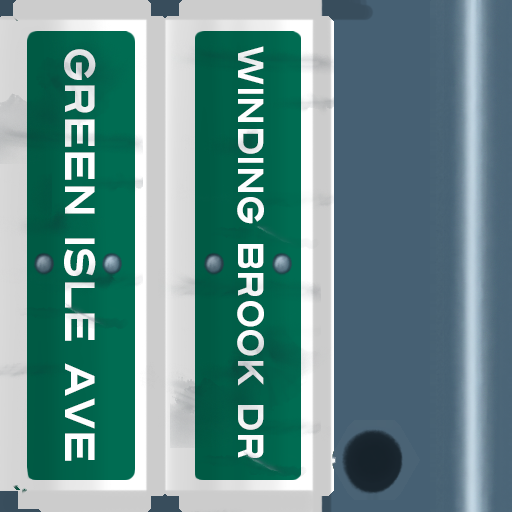
<style>
.page{position:relative;width:512px;height:512px}
.page>*{position:absolute;margin:0}
.t1{font:42px "Turnpike";color:#fefeff;scale:0.75 1}
.t2{font:36px "Turnpike";color:#fefeff;scale:0.75 1}
</style>
<div class="page">
<p class="t1" style="left:64px;top:49px;width:32px;height:412px;rotate:90deg">Green isle Ave</p>
<p class="t2" style="left:237px;top:46px;width:27px;height:412px;rotate:90deg">Winding Brook Dr</p>
</div>
